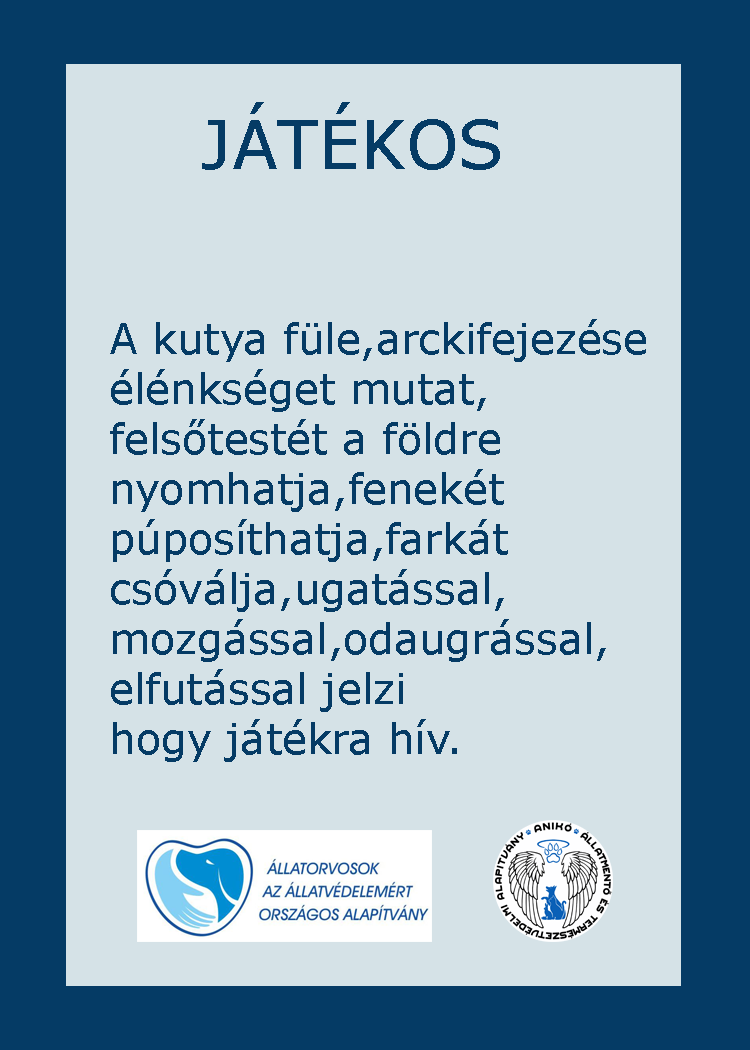
<style>
.page{position:relative;width:750px;height:1050px;background:#d5e2e7}
.page>*{position:absolute;margin:0}
.t1{font:66.7px "Verdana";color:#053b65}
.t2{font:66.7px "GravitateBRK";color:#053b65}
.t3{font:41.7px "Verdana";color:#053b65}
</style>
<div class="page">
<p class="t1" style="left:202px;top:102px;width:298px;height:68px"><span class="t2">        </span>JÁTÉKOS</p>
<p class="t3" style="left:110px;top:319px;width:536px;height:443px">A kutya füle,arckifejezése<br>élénkséget mutat,<br>felsőtestét a földre <br>nyomhatja,fenekét<br>púposíthatja,farkát <br>csóválja,ugatással,<br>mozgással,odaugrással,<br>elfutással jelzi<br>hogy játékra hív.</p>
</div>
